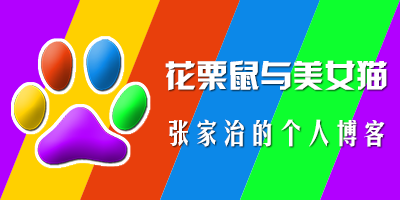
<style>
.page{position:relative;width:400px;height:200px}
.page>*{position:absolute;margin:0}
.t1{font:28px/60px "FZMHJW--GB1-0";color:#ffffff}
.t2{font:32px/60px "HYk2gj";color:#ffffff}
</style>
<div class="page">
<p class="t1" style="left:165px;top:60px;width:222px;height:87px;text-align:center"><span class="t2">花栗鼠与美女猫<br></span>张家治的个人博客</p>
</div>
